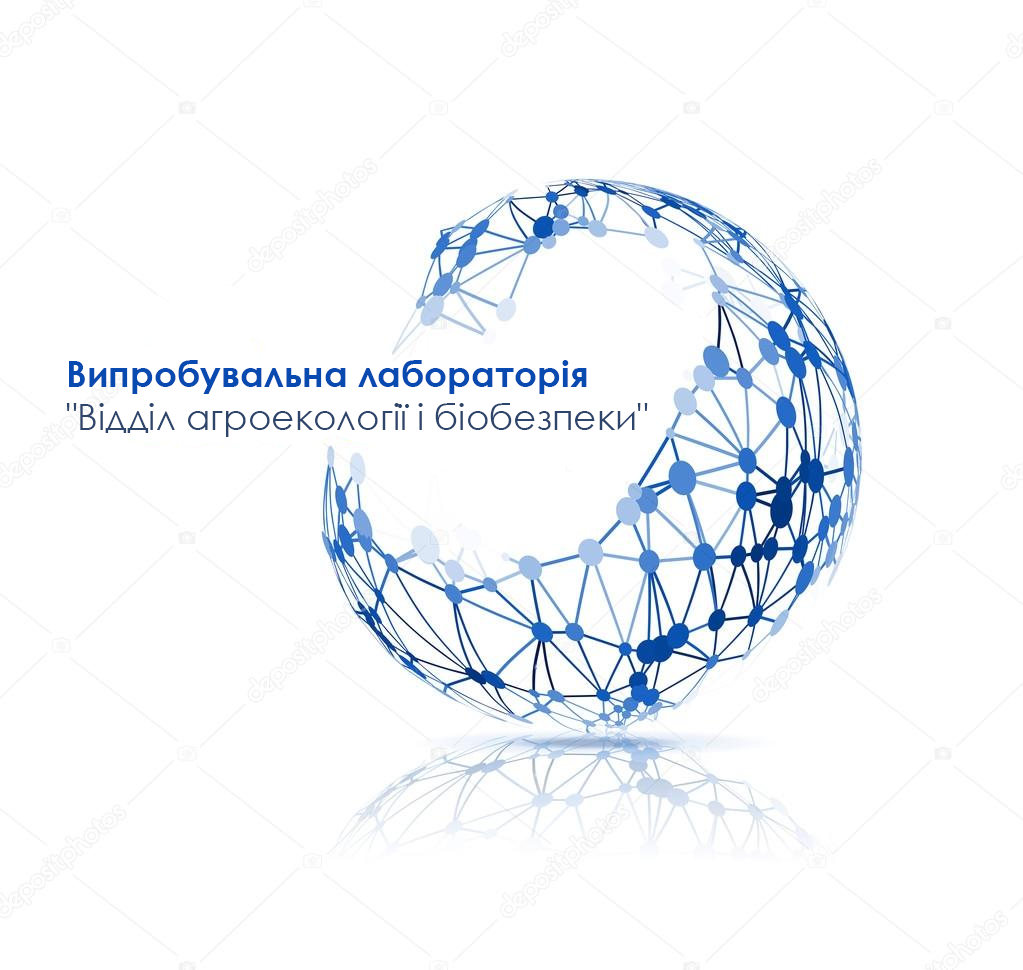
<style>
.page{position:relative;width:1023px;height:970px;background:#ffffff}
.page>*{position:absolute;margin:0}
.t1{font:36px "CenturyGothic";color:#2e456b}
.t2{font:36px "CenturyGothic-Bold";color:#084ab0}
</style>
<div class="page">
<p class="t1" style="left:66px;top:360px;width:582px;height:77px"><span class="t2">Випробувальна лабораторія<br></span>"Відділ агроекології і біобезпеки"</p>
</div>
